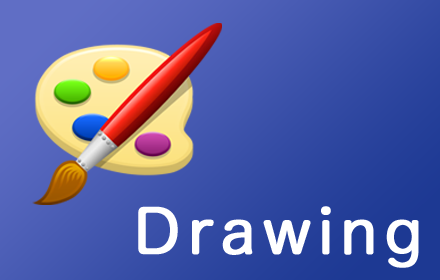
<style>
.page{position:relative;width:440px;height:280px}
.page>*{position:absolute;margin:0}
.t1{font:60px "HiraMaruPro-W4";letter-spacing:0.1em;color:#ffffff;font-weight:bold}
</style>
<div class="page">
<p class="t1" style="left:138px;top:206px;width:281px;height:62px">Drawing</p>
</div>
